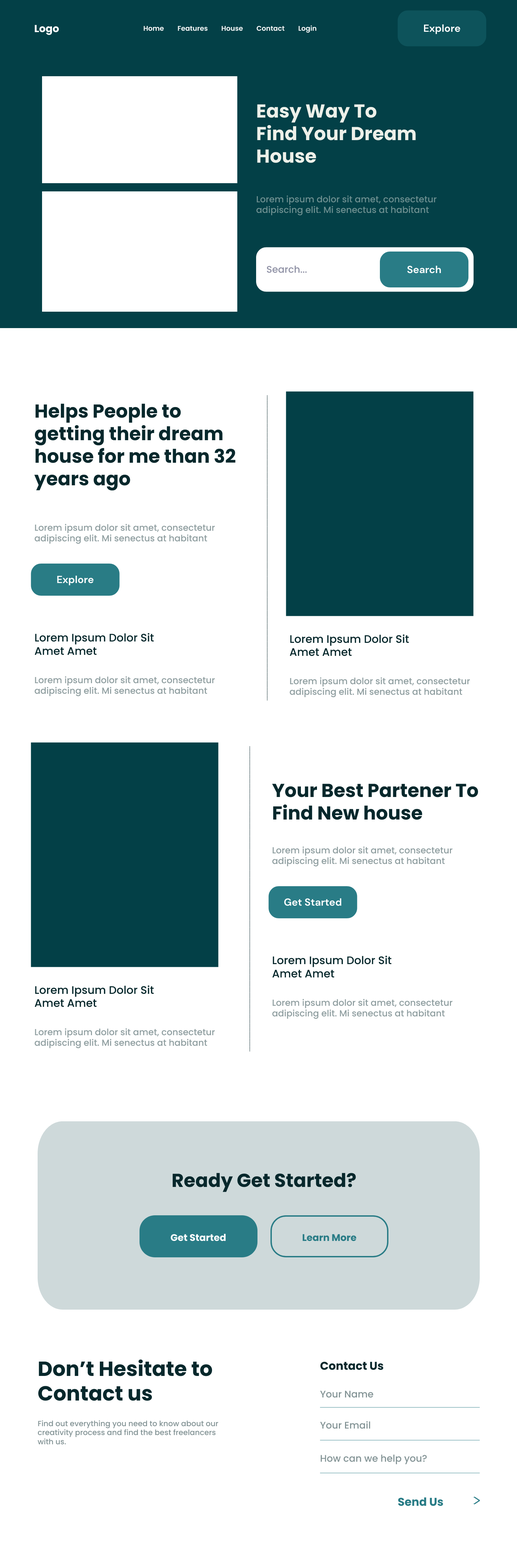
<style>
.page{position:relative;width:517px;height:1568px;background:#ffffff}
.page>*{position:absolute;margin:0}
.t1{font:6.8px "Poppins-SemiBold";color:#ffffff}
.t2{font:10.3px "DMSans-Bold";color:#ffffff}
.t3{font:18.8px "Poppins-Bold";color:#edf0e9}
.t4{font:8.9px "Poppins-Medium";color:#6d8f90}
.t5{font:9.6px "Poppins-Medium";color:#8f91a5}
.t6{font:18.8px "Poppins-Bold";color:#07282c}
.t7{font:8.9px "Poppins-Medium";color:#8f9ea0}
.t8{font:10.9px "Poppins-Medium";color:#07282c}
.t9{font:9.6px "Poppins-Bold";color:#fcfdff}
.t10{font:9.6px "Poppins-Bold";color:#297c86}
.t11{font:20.5px "Poppins-Bold";color:#07282c}
.t12{font:11.3px "Poppins-Bold";color:#07282c}
.t13{font:9.6px "Poppins-Medium";color:#839395}
.t14{font:7.5px "Poppins-Medium";color:#839395}
.t15{font:11.3px "Poppins-Bold";color:#297c86}
</style>
<div class="page">
<p class="t1" style="left:144px;top:26px;width:20px;height:5px">Home</p>
<p class="t1" style="left:178px;top:26px;width:29px;height:5px">Features</p>
<p class="t1" style="left:221px;top:26px;width:22px;height:5px">House</p>
<p class="t1" style="left:256px;top:26px;width:28px;height:5px">Contact</p>
<p class="t1" style="left:298px;top:25px;width:18px;height:8px">Login</p>
<p class="t2" style="left:423px;top:24px;width:37px;height:10px">Explore</p>
<p class="t3" style="left:257px;top:104px;width:159px;height:59px">Easy Way To<br>Find Your Dream<br>House</p>
<p class="t4" style="left:256px;top:195px;width:180px;height:21px">Lorem ipsum dolor sit amet, consectetur adipiscing elit. Mi senectus at habitant</p>
<p class="t5" style="left:267px;top:266px;width:40px;height:7px">Search...</p>
<p class="t2" style="left:407px;top:266px;width:34px;height:7px">Search</p>
<p class="t6" style="left:34px;top:404px;width:201px;height:87px">Helps People to getting their dream<br>house for me than 32 years ago</p>
<p class="t7" style="left:35px;top:524px;width:180px;height:20px">Lorem ipsum dolor sit amet, consectetur adipiscing elit. Mi senectus at habitant</p>
<p class="t2" style="left:57px;top:576px;width:37px;height:9px">Explore</p>
<p class="t8" style="left:35px;top:633px;width:119px;height:22px">Lorem Ipsum Dolor Sit<br>Amet Amet</p>
<p class="t8" style="left:289px;top:634px;width:120px;height:22px">Lorem Ipsum Dolor Sit<br>Amet Amet</p>
<p class="t7" style="left:35px;top:676px;width:180px;height:21px">Lorem ipsum dolor sit amet, consectetur adipiscing elit. Mi senectus at habitant</p>
<p class="t7" style="left:289px;top:677px;width:181px;height:21px">Lorem ipsum dolor sit amet, consectetur adipiscing elit. Mi senectus at habitant</p>
<p class="t6" style="left:272px;top:784px;width:206px;height:36px">Your Best Partener To Find New house</p>
<p class="t7" style="left:272px;top:846px;width:180px;height:21px">Lorem ipsum dolor sit amet, consectetur adipiscing elit. Mi senectus at habitant</p>
<p class="t2" style="left:284px;top:898px;width:57px;height:8px">Get Started</p>
<p class="t8" style="left:272px;top:956px;width:119px;height:22px">Lorem Ipsum Dolor Sit<br>Amet Amet</p>
<p class="t8" style="left:35px;top:985px;width:119px;height:22px">Lorem Ipsum Dolor Sit<br>Amet Amet</p>
<p class="t7" style="left:272px;top:999px;width:180px;height:20px">Lorem ipsum dolor sit amet, consectetur adipiscing elit. Mi senectus at habitant</p>
<p class="t7" style="left:35px;top:1028px;width:180px;height:21px">Lorem ipsum dolor sit amet, consectetur adipiscing elit. Mi senectus at habitant</p>
<p class="t6" style="left:173px;top:1173px;width:183px;height:19px">Ready Get Started?</p>
<p class="t9" style="left:171px;top:1234px;width:55px;height:7px">Get Started</p>
<p class="t10" style="left:302px;top:1234px;width:54px;height:7px">Learn More</p>
<p class="t11" style="left:38px;top:1359px;width:174px;height:42px">Don’t Hesitate to<br>Contact us</p>
<p class="t12" style="left:320px;top:1362px;width:63px;height:8px">Contact Us</p>
<p class="t13" style="left:320px;top:1391px;width:53px;height:7px">Your Name</p>
<p class="t14" style="left:38px;top:1420px;width:180px;height:25px">Find out everything you need to know about our creativity process and find the best freelancers with us.</p>
<p class="t13" style="left:320px;top:1421px;width:50px;height:8px">Your Email</p>
<p class="t13" style="left:321px;top:1455px;width:106px;height:9px">How can we help you?</p>
<p class="t15" style="left:398px;top:1497px;width:45px;height:9px">Send Us</p>
</div>
